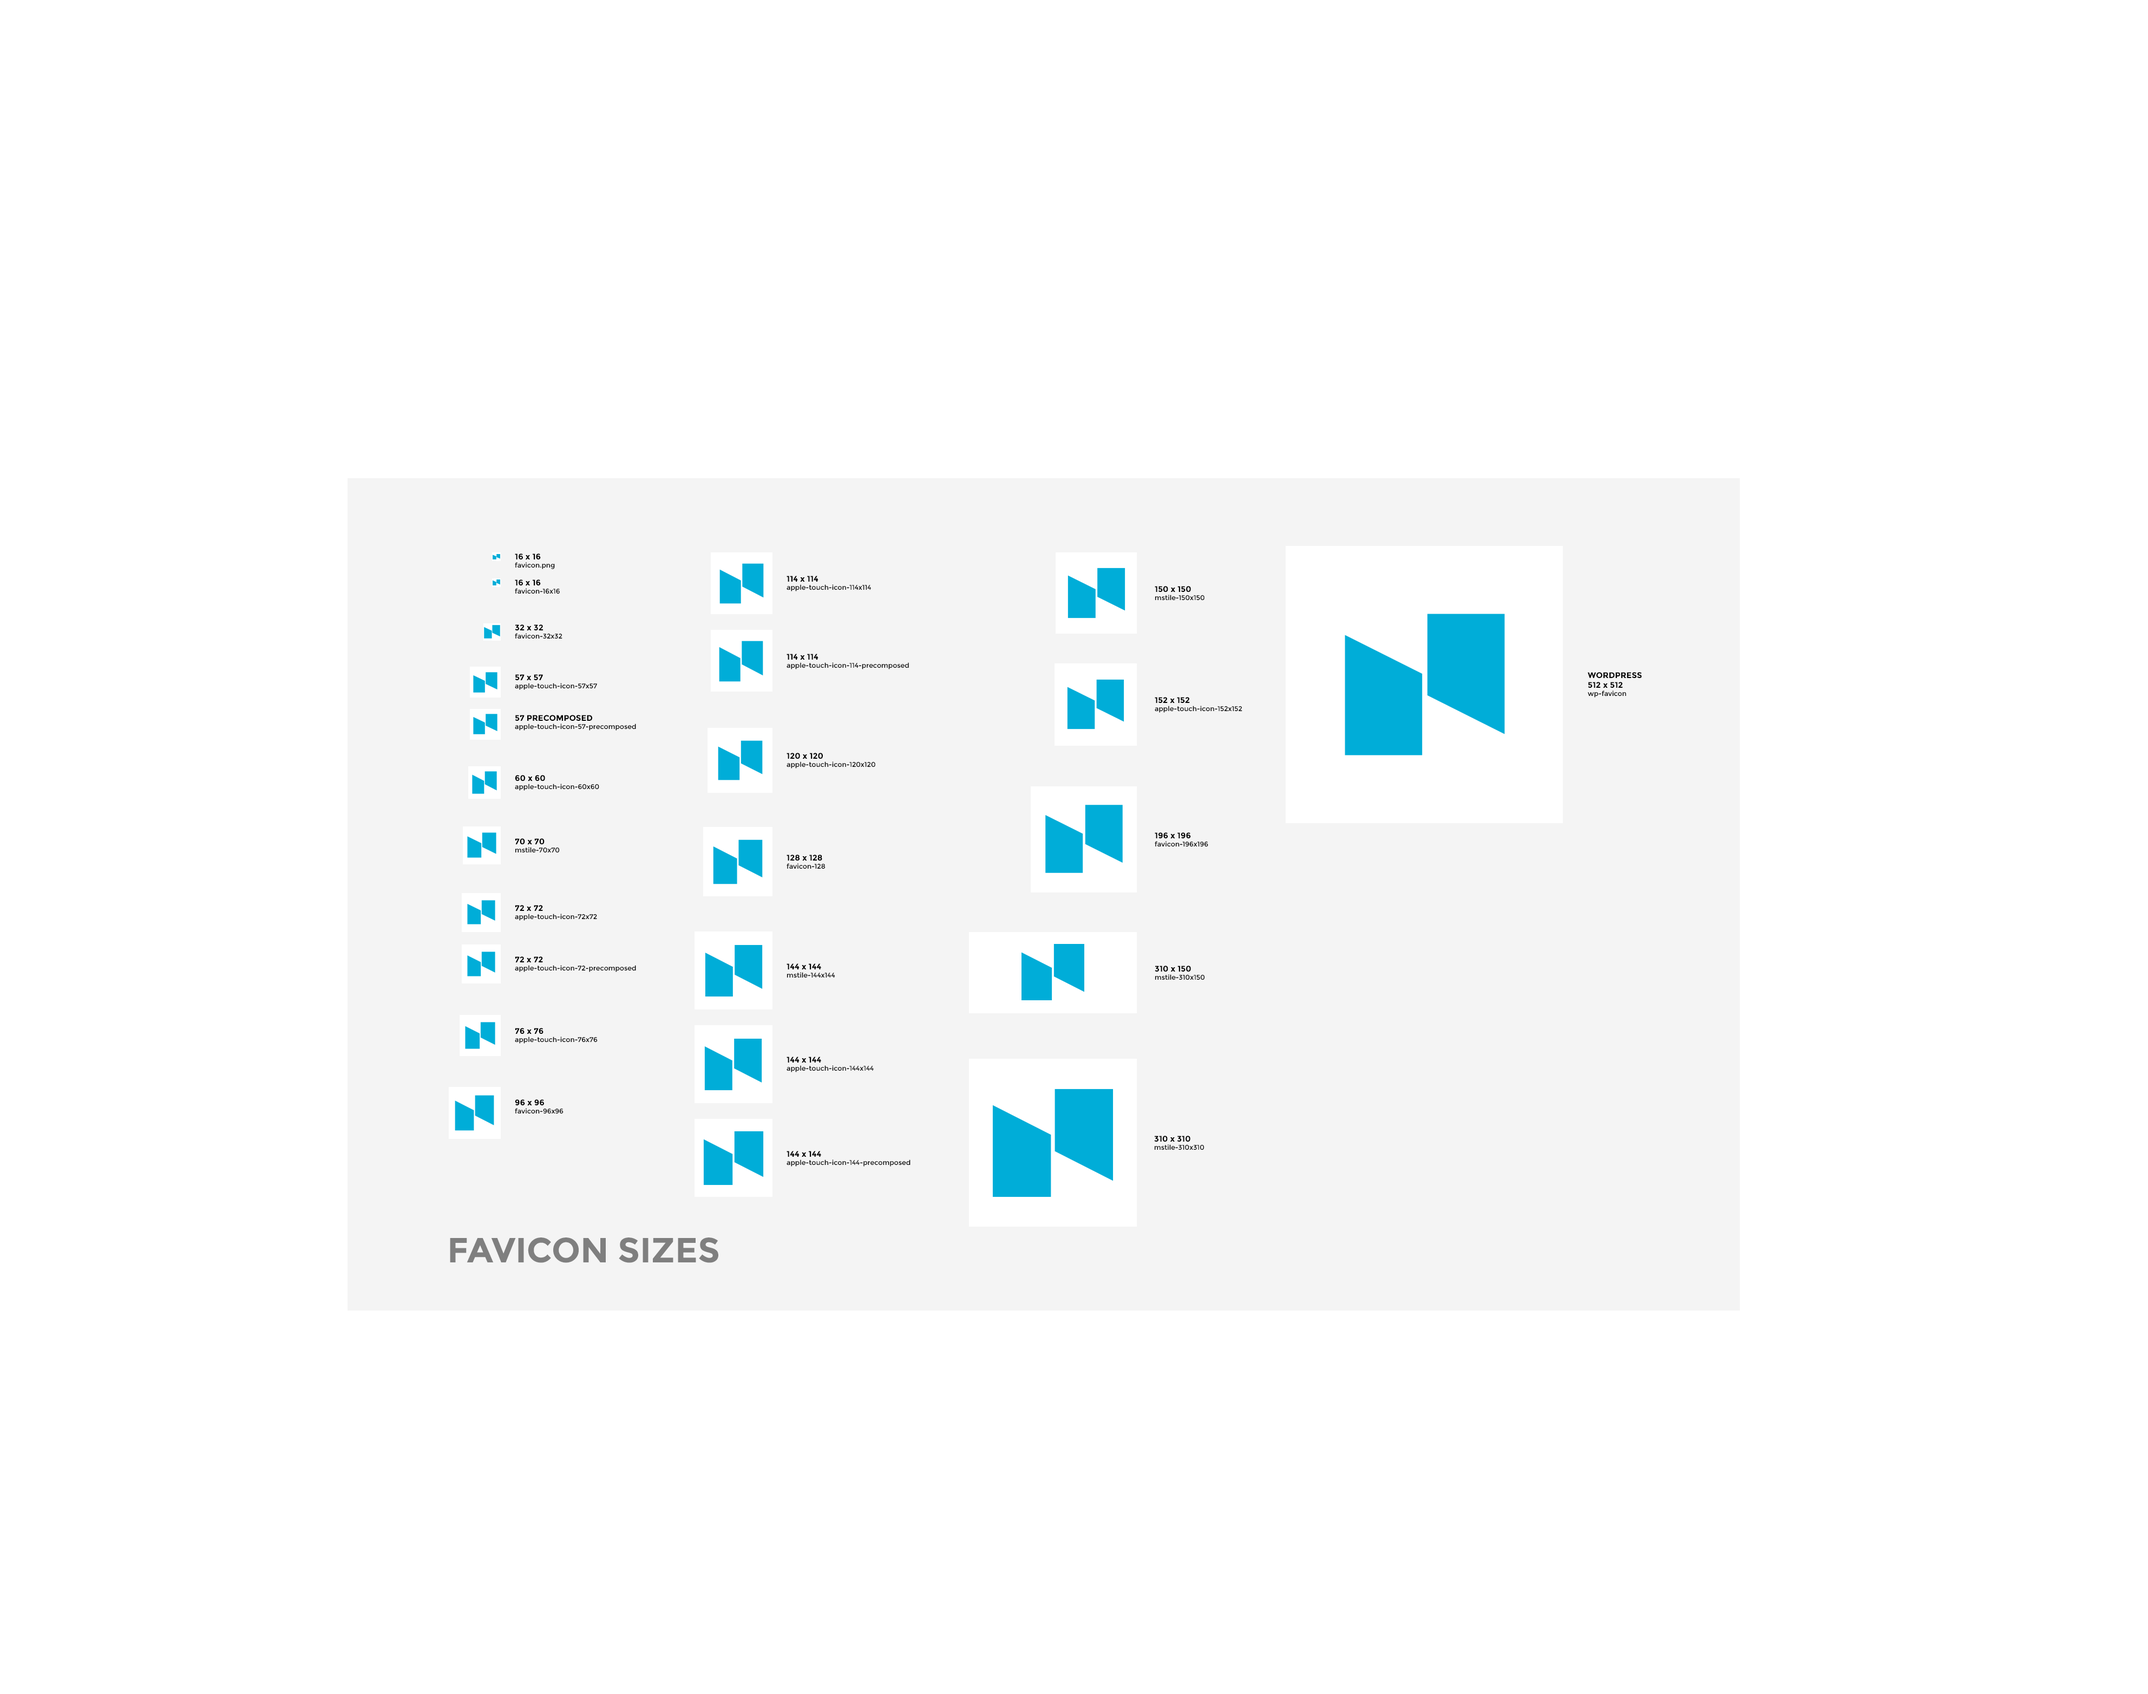
<style>
.page{position:relative;width:2148px;height:1694px;background:#ffffff}
.page>*{position:absolute;margin:0}
.t1{font:6.8px "Montserrat-Regular";color:#000000}
.t2{font:8.2px "Montserrat-Bold";color:#000000}
.t3{font:34.7px "Montserrat-Bold";color:#7f7f7f}
</style>
<div class="page">
<p class="t1" style="left:515px;top:553px;width:40px;height:16px"><span class="t2">16 x 16<br></span>favicon.png</p>
<p class="t1" style="left:515px;top:579px;width:45px;height:15px"><span class="t2">16 x 16<br></span>favicon-16x16</p>
<p class="t1" style="left:787px;top:576px;width:84px;height:15px"><span class="t2">114 x 114<br></span>apple-touch-icon-114x114</p>
<p class="t1" style="left:1155px;top:586px;width:50px;height:14px"><span class="t2">150 x 150<br></span>mstile-150x150</p>
<p class="t1" style="left:515px;top:624px;width:48px;height:15px"><span class="t2">32 x 32<br></span>favicon-32x32</p>
<p class="t1" style="left:787px;top:653px;width:122px;height:16px"><span class="t2">114 x 114<br></span>apple-touch-icon-114-precomposed</p>
<p class="t1" style="left:515px;top:674px;width:82px;height:16px"><span class="t2">57 x 57<br></span>apple-touch-icon-57x57</p>
<p class="t2" style="left:1588px;top:672px;width:54px;height:25px">WORDPRESS<br>512 x 512<br><span class="t1">wp-favicon</span></p>
<p class="t1" style="left:1155px;top:697px;width:88px;height:15px"><span class="t2">152 x 152<br></span>apple-touch-icon-152x152</p>
<p class="t1" style="left:515px;top:715px;width:121px;height:15px"><span class="t2">57 PRECOMPOSED<br></span>apple-touch-icon-57-precomposed</p>
<p class="t1" style="left:787px;top:753px;width:88px;height:15px"><span class="t2">120 x 120<br></span>apple-touch-icon-120x120</p>
<p class="t1" style="left:515px;top:775px;width:84px;height:15px"><span class="t2">60 x 60<br></span>apple-touch-icon-60x60</p>
<p class="t1" style="left:1155px;top:832px;width:53px;height:15px"><span class="t2">196 x 196<br></span>favicon-196x196</p>
<p class="t1" style="left:515px;top:838px;width:45px;height:15px"><span class="t2">70 x 70<br></span>mstile-70x70</p>
<p class="t1" style="left:787px;top:854px;width:39px;height:15px"><span class="t2">128 x 128<br></span>favicon-128</p>
<p class="t1" style="left:515px;top:905px;width:82px;height:15px"><span class="t2">72 x 72<br></span>apple-touch-icon-72x72</p>
<p class="t1" style="left:515px;top:956px;width:121px;height:16px"><span class="t2">72 x 72<br></span>apple-touch-icon-72-precomposed</p>
<p class="t1" style="left:787px;top:963px;width:48px;height:15px"><span class="t2">144 x 144<br></span>mstile-144x144</p>
<p class="t1" style="left:1155px;top:965px;width:50px;height:15px"><span class="t2">310 x 150<br></span>mstile-310x150</p>
<p class="t1" style="left:515px;top:1028px;width:83px;height:15px"><span class="t2">76 x 76<br></span>apple-touch-icon-76x76</p>
<p class="t1" style="left:787px;top:1056px;width:87px;height:16px"><span class="t2">144 x 144<br></span>apple-touch-icon-144x144</p>
<p class="t1" style="left:515px;top:1099px;width:49px;height:15px"><span class="t2">96 x 96<br></span>favicon-96x96</p>
<p class="t1" style="left:1154px;top:1135px;width:51px;height:15px"><span class="t2">310 x 310<br></span>mstile-310x310</p>
<p class="t1" style="left:787px;top:1150px;width:124px;height:16px"><span class="t2">144 x 144<br></span>apple-touch-icon-144-precomposed</p>
<p class="t3" style="left:450px;top:1237px;width:268px;height:26px">FAVICON SIZES</p>
</div>
